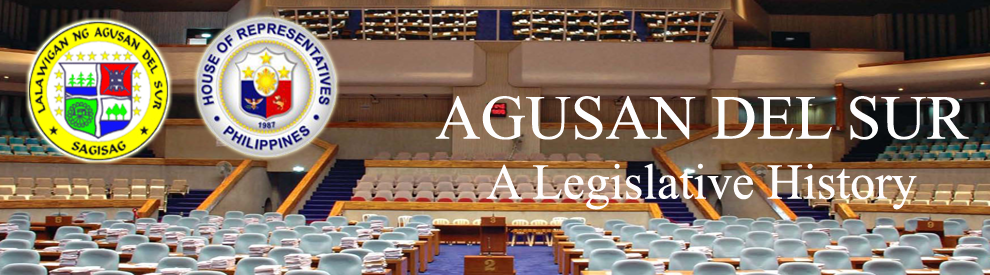
<style>
.page{position:relative;width:990px;height:275px}
.page>*{position:absolute;margin:0}
.t1{font:50px "TimesNewRomanPSMT";color:#fdfcfc}
.t2{font:62.5px "TimesNewRomanPSMT";color:#fdfdfd}
</style>
<div class="page">
<p class="t1" style="left:435px;top:96px;width:534px;height:114px;text-align:center"><span class="t2">AGUSAN DEL SUR<br></span>A Legislative History</p>
</div>
